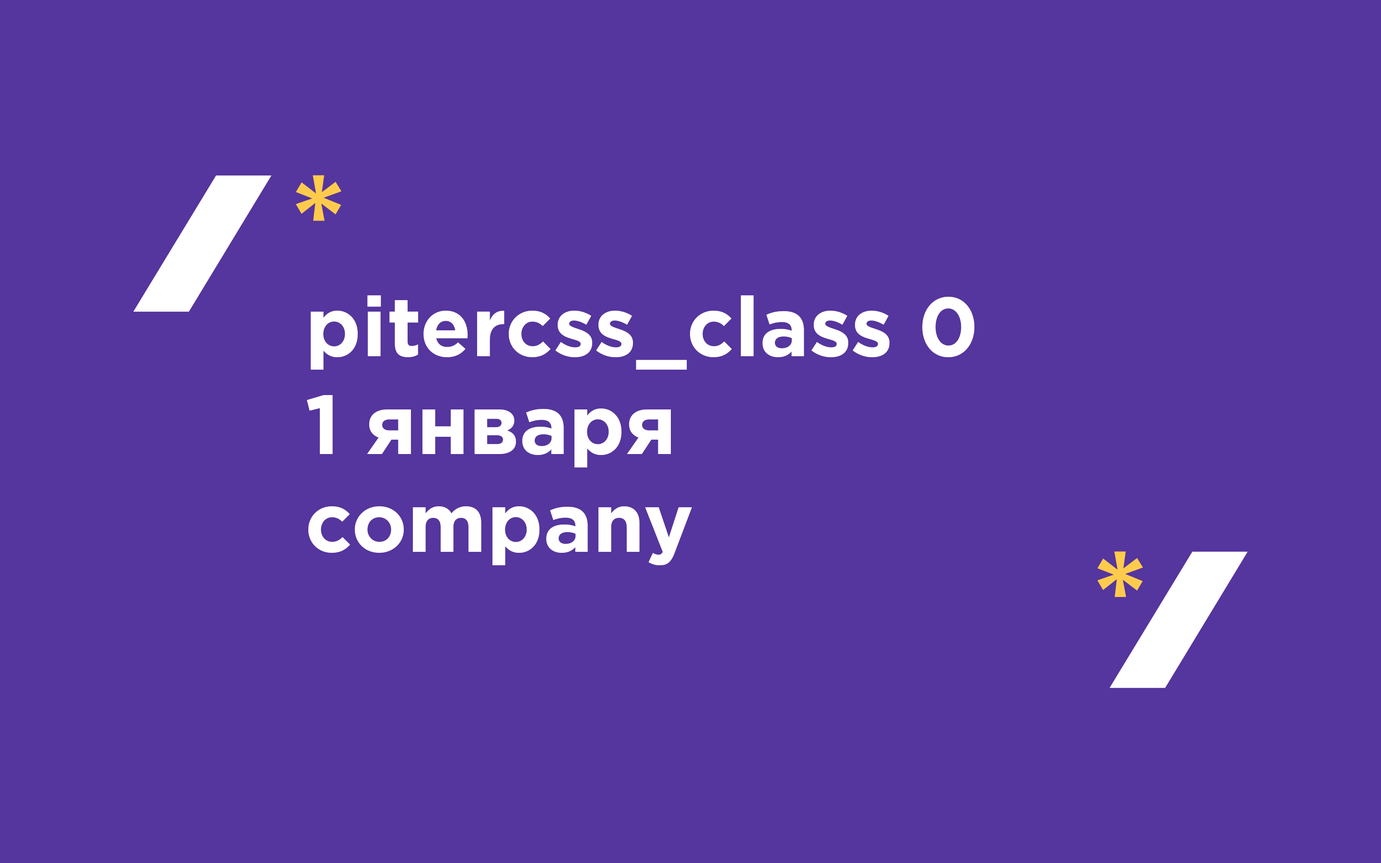
<style>
.page{position:relative;width:1381px;height:863px;background:#55359e}
.page>*{position:absolute;margin:0}
.t1{font:83.6px/97.7px "GothamPro-Bold";color:#ffffff}
</style>
<div class="page">
<p class="t1" style="left:307px;top:295px;width:668px;height:270px">pitercss_class 0<br>1 января<br>company</p>
</div>
